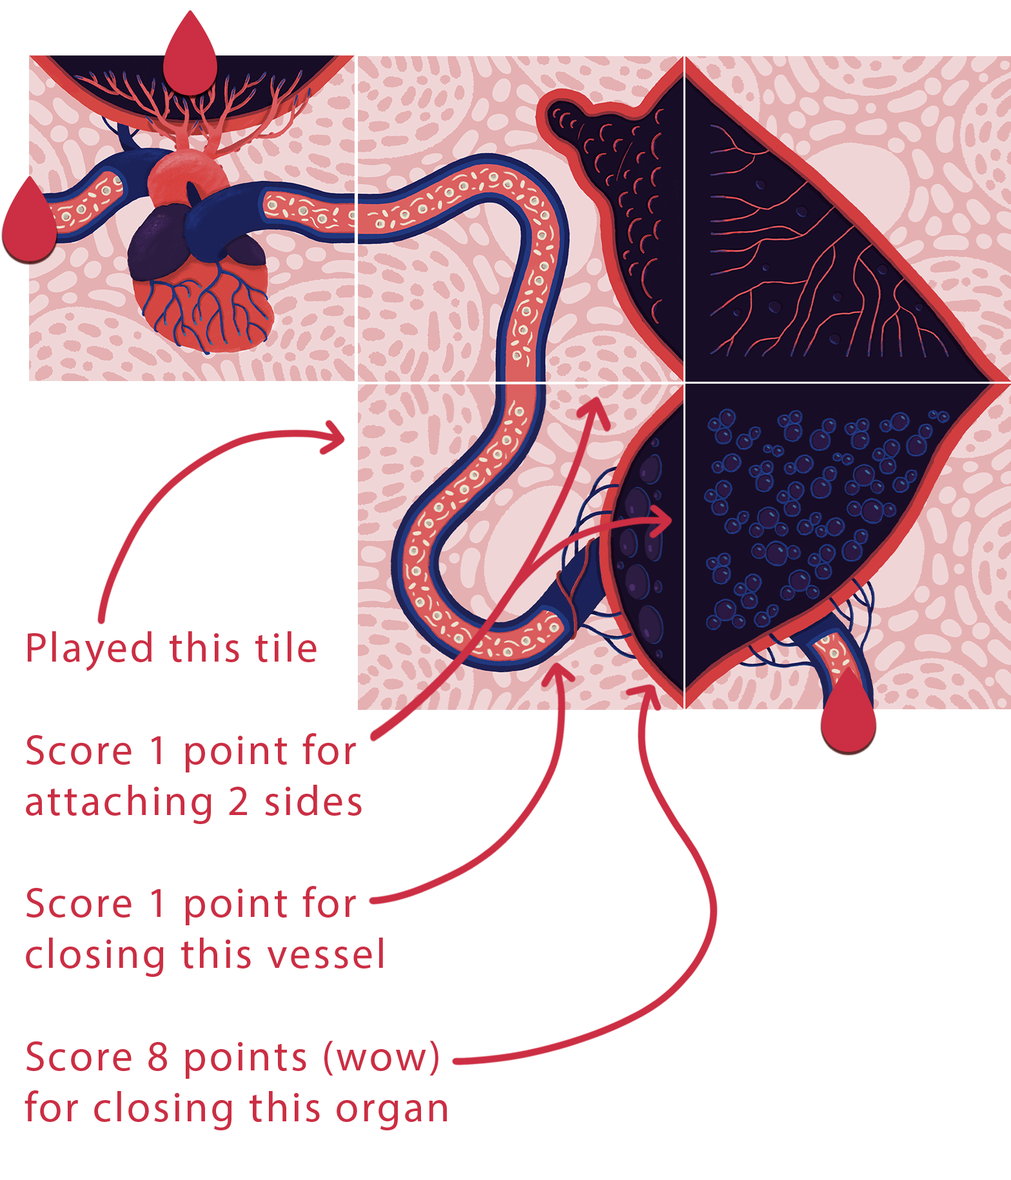
<style>
.page{position:relative;width:1011px;height:1180px;background:#ffffff}
.page>*{position:absolute;margin:0}
.t1{font:42.5px "MyriadPro-Regular";letter-spacing:0.06em;color:#cb2e43}
</style>
<div class="page">
<p class="t1" style="left:24px;top:631px;width:423px;height:499px">Played this tile<br><br>Score 1 point for<br>attaching 2 sides<br><br>Score 1 point for <br>closing this vessel<br><br>Score 8 points (wow) <br>for closing this organ</p>
</div>
